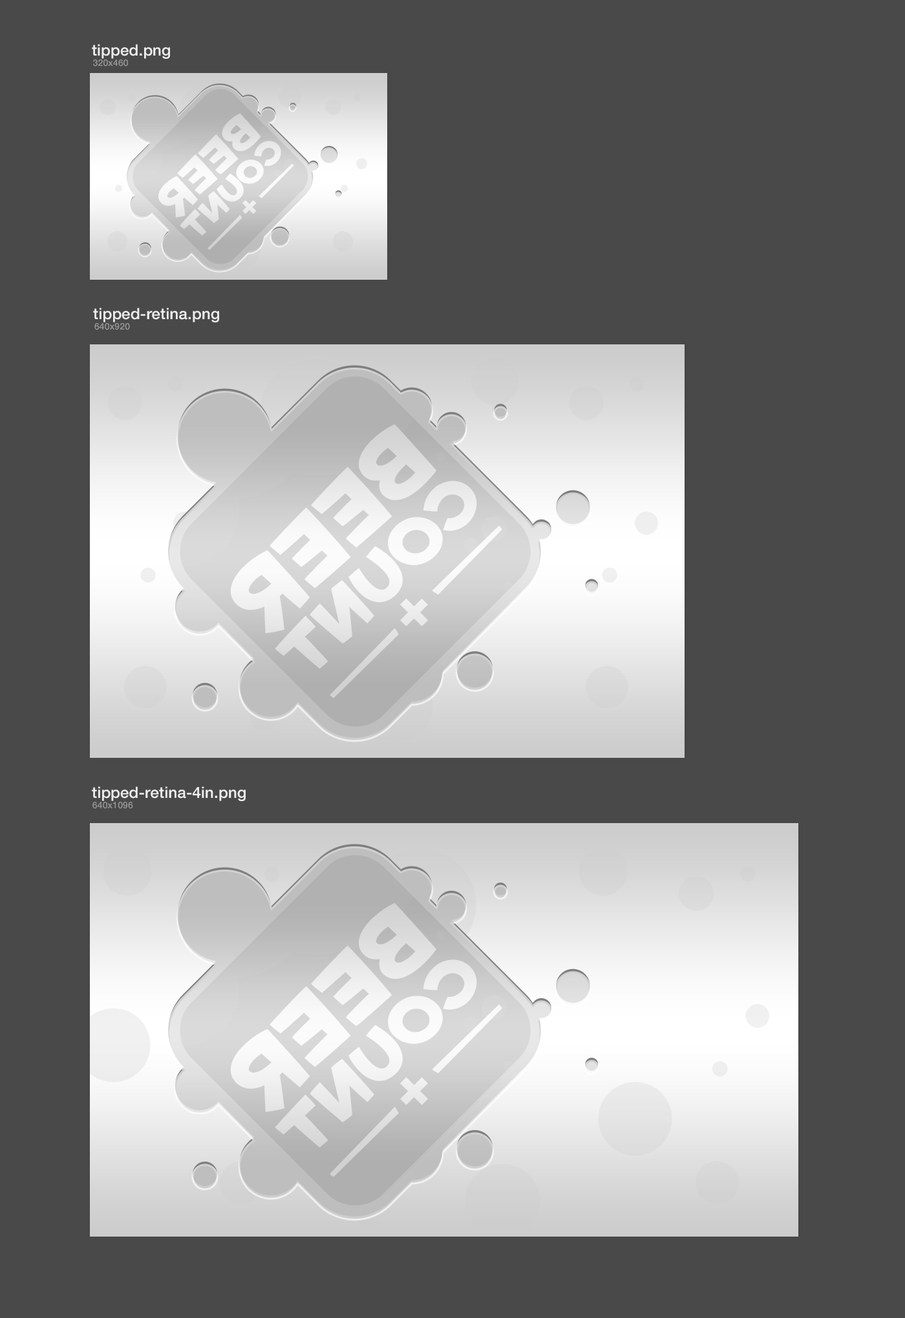
<style>
.page{position:relative;width:905px;height:1318px;background:#494949}
.page>*{position:absolute;margin:0}
.t1{font:15.5px "HelveticaNeue-Medium";letter-spacing:0.01em;color:#eeeeee}
.t2{font:9px "HelveticaNeue-Medium";letter-spacing:0.01em;color:#999999}
.t3{font:43.5px "House-A-Rama-Kingpin";color:#f1f1f1}
.t4{font:31.4px "House-A-Rama-Kingpin";color:#f5eddf}
.t5{font:51.8px "HouseGothic-BoldFour";color:#f5eddf}
.t6{font:87px "House-A-Rama-Kingpin";color:#f1f1f1}
.t7{font:62.8px "House-A-Rama-Kingpin";color:#f5eddf}
.t8{font:103.5px "HouseGothic-BoldFour";color:#f5eddf}
</style>
<div class="page">
<p class="t1" style="left:92px;top:44px;width:78px;height:15px">tipped.png</p>
<p class="t2" style="left:93px;top:59px;width:35px;height:8px">320x460</p>
<p class="t3" style="left:158px;top:113px;width:103px;height:105px;rotate:135deg">Beer</p>
<p class="t4" style="left:180px;top:141px;width:101px;height:95px;rotate:135deg">Count</p>
<p class="t5" style="left:242px;top:200px;width:15px;height:14px;rotate:135deg">+</p>
<p class="t1" style="left:93px;top:308px;width:126px;height:14px">tipped-retina.png</p>
<p class="t2" style="left:94px;top:323px;width:36px;height:7px">640x920</p>
<p class="t6" style="left:230px;top:424px;width:206px;height:209px;rotate:135deg">Beer</p>
<p class="t7" style="left:275px;top:481px;width:202px;height:188px;rotate:135deg">Count</p>
<p class="t8" style="left:400px;top:598px;width:28px;height:29px;rotate:135deg">+</p>
<p class="t1" style="left:92px;top:786px;width:154px;height:15px">tipped-retina-4in.png</p>
<p class="t2" style="left:92px;top:802px;width:41px;height:7px">640x1096</p>
<p class="t6" style="left:230px;top:903px;width:206px;height:209px;rotate:135deg">Beer</p>
<p class="t7" style="left:275px;top:960px;width:202px;height:188px;rotate:135deg">Count</p>
<p class="t8" style="left:400px;top:1077px;width:28px;height:29px;rotate:135deg">+</p>
</div>
